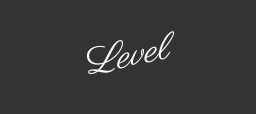
<style>
.page{position:relative;width:256px;height:114px;background:#333333}
.page>*{position:absolute;margin:0}
.t1{font:38.6px "Parisienne-Regular";color:#ffffff}
</style>
<div class="page">
<p class="t1" style="left:86px;top:31px;width:89px;height:43px">Level</p>
</div>
